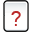
<style>
.page{position:relative;width:32px;height:32px;background:#ffffff}
.page>*{position:absolute;margin:0}
.t1{font:19.8px "ArialMT";color:#ba2a2a}
</style>
<div class="page">
<p class="t1" style="left:11px;top:11px;width:10px;height:15px">?</p>
</div>
